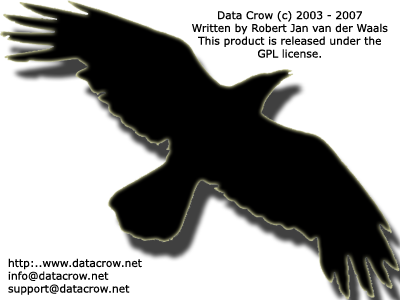
<style>
.page{position:relative;width:400px;height:300px;background:#ffffff}
.page>*{position:absolute;margin:0}
.t1{font:10.7px "Verdana";color:#000000}
</style>
<div class="page">
<p class="t1" style="left:192px;top:11px;width:196px;height:47px;text-align:center">Data Crow (c) 2003 - 2007<br>Written by Robert Jan van der Waals<br>This product is released under the GPL license.</p>
<p class="t1" style="left:8px;top:258px;width:134px;height:37px">http:..www.datacrow.net<br>info@datacrow.net<br>support@datacrow.net</p>
</div>
